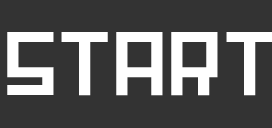
<style>
.page{position:relative;width:272px;height:128px;background:#333333}
.page>*{position:absolute;margin:0}
.t1{font:87.7px "Mars";color:#ffffff;text-transform:uppercase;font-weight:bold}
</style>
<div class="page">
<p class="t1" style="left:7px;top:32px;width:266px;height:64px">START</p>
</div>
